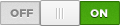
<style>
.page{position:relative;width:120px;height:26px}
.page>*{position:absolute;margin:0}
.t1{font:11px "GothamBlack";color:#888888;text-transform:uppercase}
.t2{font:11px "GothamBlack";color:#fefffe;text-transform:uppercase}
</style>
<div class="page">
<p class="t1" style="left:10px;top:9px;width:23px;height:8px">off</p>
<p class="t2" style="left:90px;top:9px;width:18px;height:8px">on</p>
</div>
